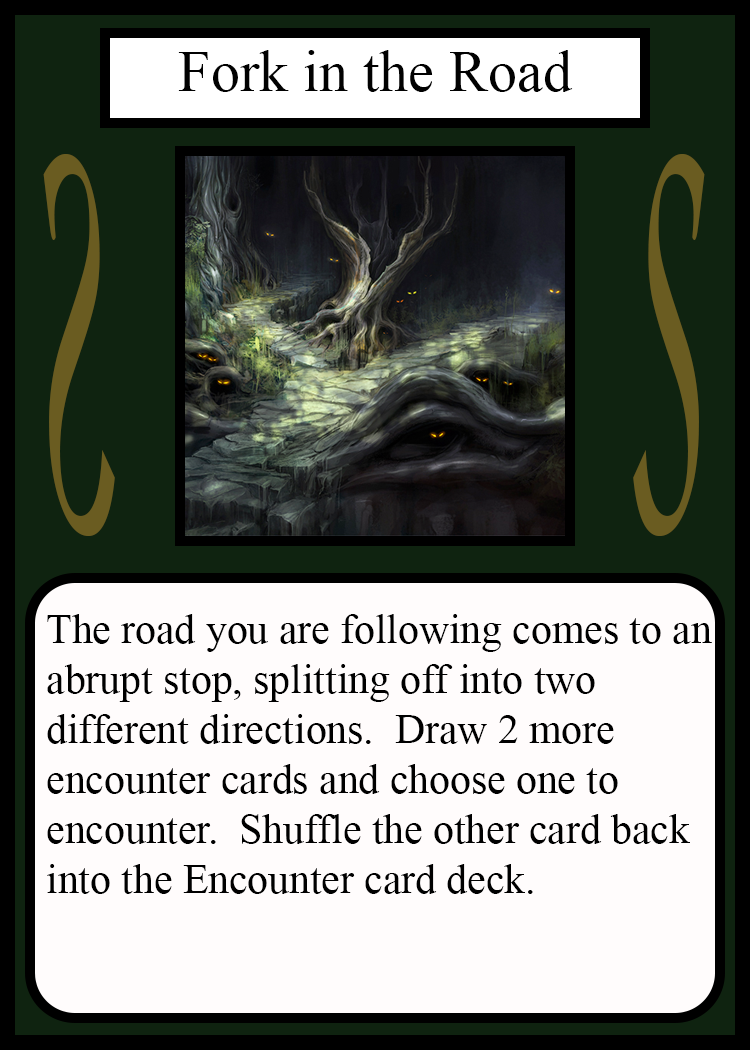
<style>
.page{position:relative;width:750px;height:1050px;background:#fffcfc}
.page>*{position:absolute;margin:0}
.t1{font:58.3px "TimesNewRomanPSMT";color:#010101}
.t2{font:548.5px "Apple-Chancery";color:#6a5c21;scale:0.27 1}
.t3{font:548.2px "Apple-Chancery";color:#6a5c21;scale:0.27 1}
.t4{font:41.7px "TimesNewRomanPSMT";color:#000000}
</style>
<div class="page">
<p class="t1" style="left:178px;top:50px;width:395px;height:42px">Fork in the Road</p>
<p class="t2" style="left:43px;top:154px;width:72px;height:382px;rotate:180deg">S</p>
<p class="t3" style="left:633px;top:154px;width:72px;height:382px">S</p>
<p class="t4" style="left:47px;top:614px;width:665px;height:280px">The road you are following comes to an<br>abrupt stop, splitting off into two<br>different directions.  Draw 2 more<br>encounter cards and choose one to<br>encounter.  Shuffle the other card back<br>into the Encounter card deck.</p>
</div>
